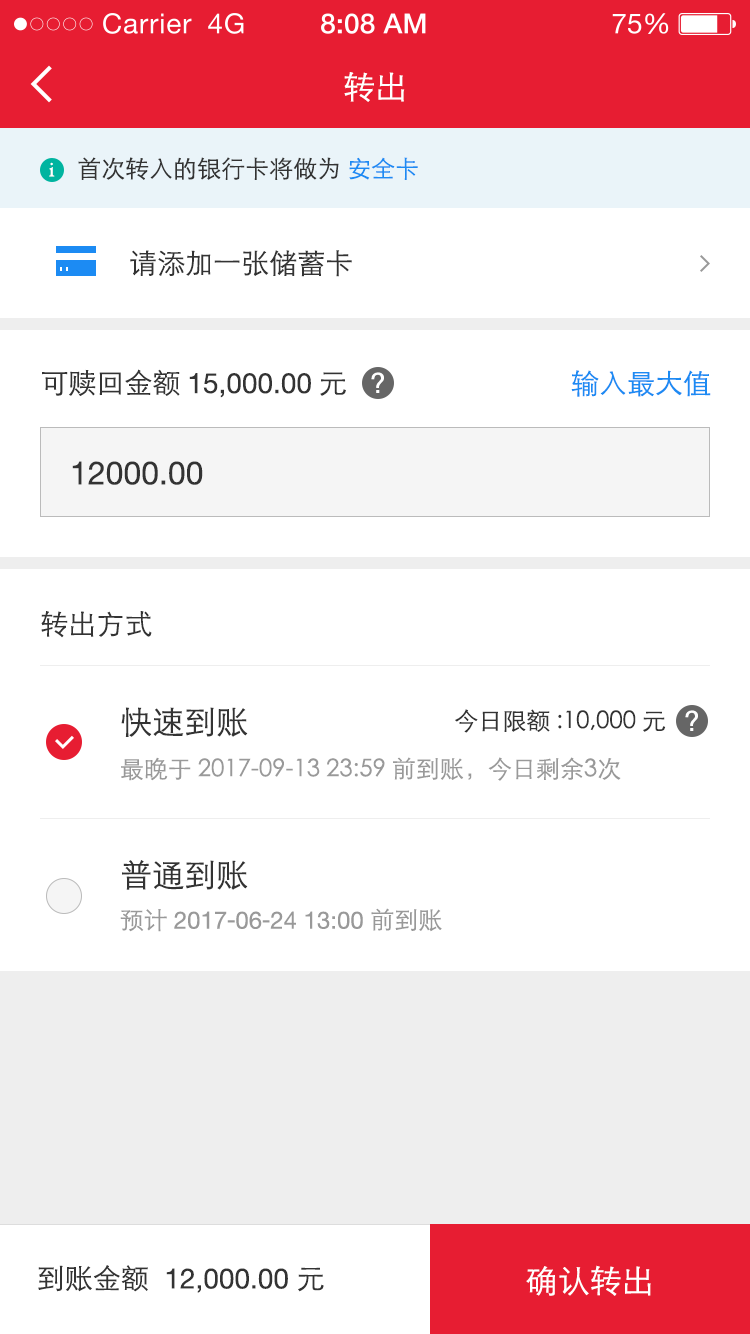
<style>
.page{position:relative;width:750px;height:1334px;background:#ffffff}
.page>*{position:absolute;margin:0}
.t1{font:32px "STXihei";color:#ffffff}
.t2{font:24px "STXihei";color:#333333}
.t3{font:24px "STXihei";color:#1c8bf3}
.t4{font:20px "HoeflerText-Regular";color:#ffffff}
.t5{font:28px "STXihei";color:#333333}
.t6{font:28px "HelveticaNeue";color:#333333}
.t7{font:28px "STXihei";color:#ffffff}
.t8{font:28px "STXihei";color:#1c8bf3}
.t9{font:32px "HelveticaNeue";color:#333333}
.t10{font:32px "STXihei";color:#333333}
.t11{font:24px "STXihei";color:#999999}
.t12{font:24px "MyriadPro-Regular";color:#999999}
.t13{font:24px "HelveticaNeue";color:#999999}
.t14{font:24px "AdobeHeitiStd-Regular";color:#999999}
</style>
<div class="page">
<p class="t1" style="left:344px;top:72px;width:61px;height:30px">转出</p>
<p class="t2" style="left:78px;top:157px;width:340px;height:23px">首次转入的银行卡将做为 <span class="t3">安全卡</span></p>
<p class="t4" style="left:49px;top:162px;width:6px;height:15px">i</p>
<p class="t5" style="left:130px;top:250px;width:222px;height:27px">请添加一张储蓄卡</p>
<p class="t6" style="left:42px;top:369px;width:304px;height:29px"><span class="t5">可赎回金额 </span>15,000.00<span class="t5">元</span></p>
<p class="t7" style="left:371px;top:372px;width:13px;height:21px">?</p>
<p class="t8" style="left:571px;top:370px;width:140px;height:27px">输入最大值</p>
<p class="t9" style="left:72px;top:461px;width:131px;height:24px">12000.00</p>
<p class="t5" style="left:41px;top:611px;width:111px;height:27px">转出方式</p>
<p class="t10" style="left:121px;top:707px;width:127px;height:30px">快速到账</p>
<p class="t2" style="left:455px;top:709px;width:211px;height:24px">今日限额:10,000元</p>
<p class="t7" style="left:685px;top:710px;width:13px;height:21px">?</p>
<p class="t11" style="left:121px;top:757px;width:500px;height:24px">最晚于 2017-09-13 23:59 前到账，今日剩余3次<span class="t12">12,000 </span>元</p>
<p class="t10" style="left:122px;top:860px;width:126px;height:30px">普通到账</p>
<p class="t13" style="left:120px;top:908px;width:322px;height:24px"><span class="t11">预计 </span>2017<span class="t14">-</span>06<span class="t14">-</span>24 13:00 <span class="t11">前到账</span></p>
<p class="t6" style="left:38px;top:1265px;width:286px;height:28px"><span class="t5">到账金额</span>  12,000.00 <span class="t5">元</span></p>
<p class="t1" style="left:526px;top:1265px;width:125px;height:31px">确认转出</p>
</div>
